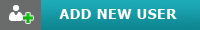
<style>
.page{position:relative;width:200px;height:30px}
.page>*{position:absolute;margin:0}
.t1{font:14px "Tahoma-Bold";letter-spacing:0.04em;color:#ffffff}
</style>
<div class="page">
<p class="t1" style="left:59px;top:9px;width:118px;height:10px">ADD NEW USER</p>
</div>
